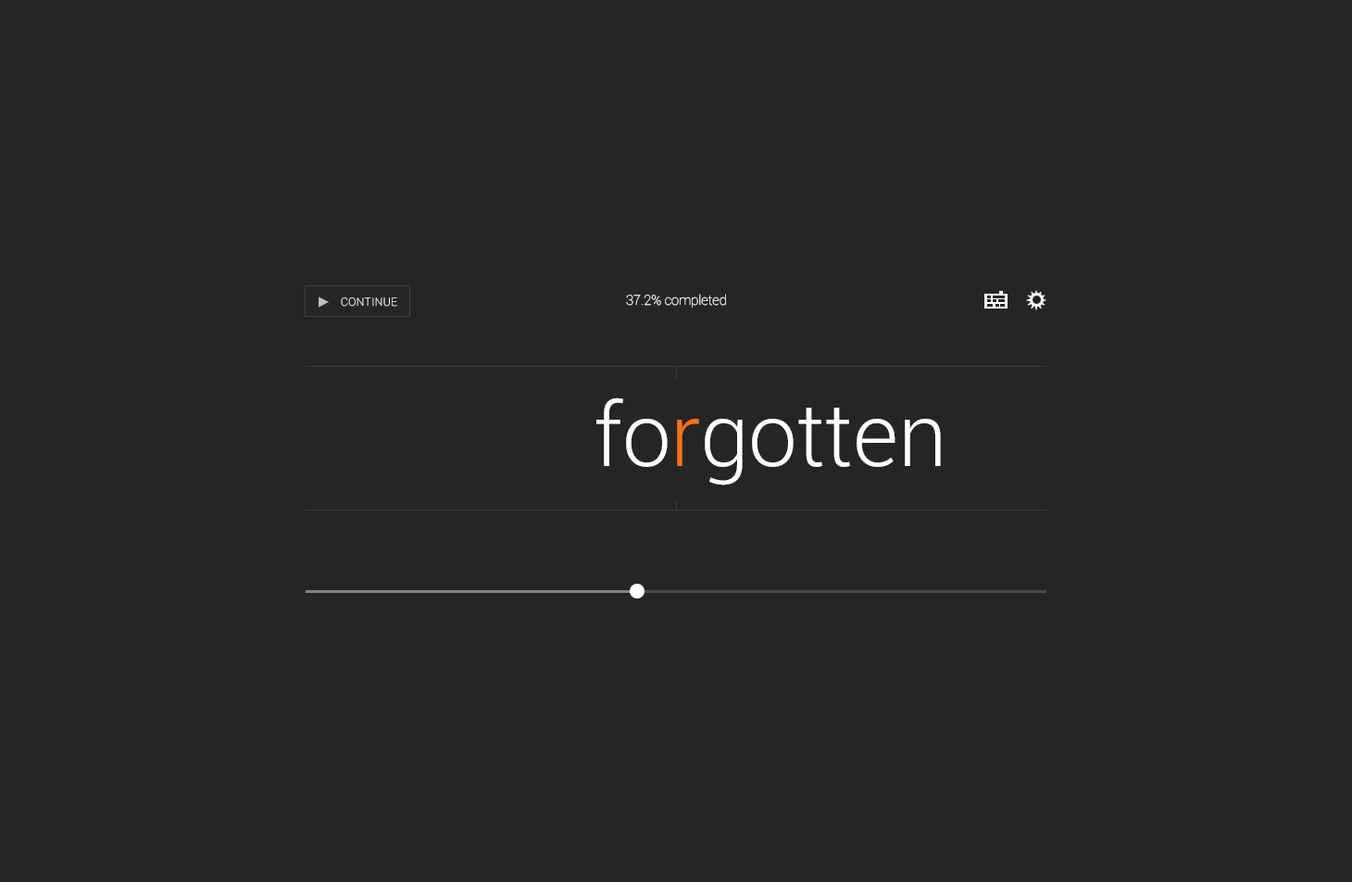
<style>
.page{position:relative;width:1352px;height:882px;background:#252525}
.page>*{position:absolute;margin:0}
.t1{font:13.6px "Roboto-Thin";color:#ffffff}
.t2{font:11.1px "Roboto-Thin";letter-spacing:0.04em;color:#ffffff}
.t3{font:87.7px "Roboto-Light";color:#ffffff}
.t4{font:87.7px "Roboto-Light";color:#f37315}
</style>
<div class="page">
<p class="t1" style="left:626px;top:294px;width:100px;height:14px">37.2% completed</p>
<p class="t2" style="left:341px;top:297px;width:56px;height:10px">CONTINUE</p>
<p class="t3" style="left:596px;top:397px;width:345px;height:88px">fo<span class="t4">r</span>gotten</p>
</div>
